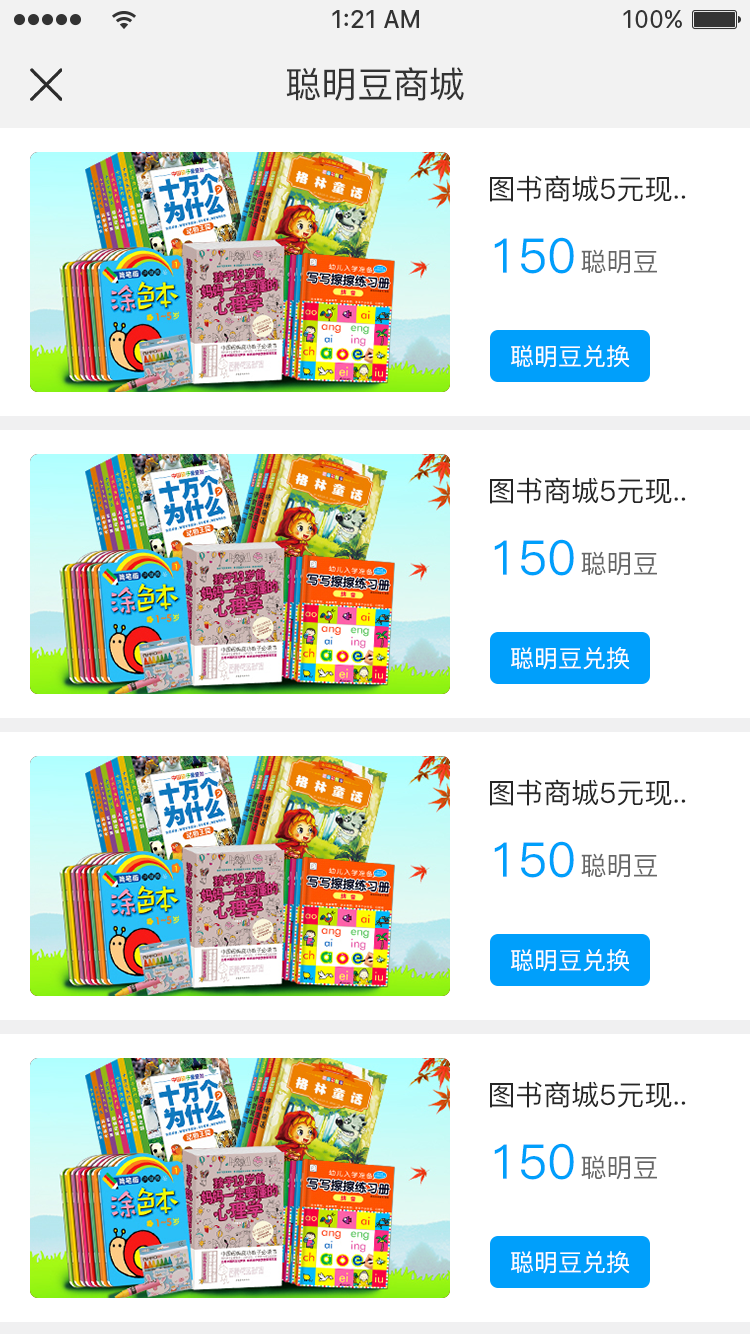
<style>
.page{position:relative;width:750px;height:1334px;background:#ffffff}
.page>*{position:absolute;margin:0}
.t1{font:36px "PingFang-SC-Medium";color:#333333}
.t2{font:28px "PingFang-SC-Medium";color:#262626}
.t3{font:48px "PingFang-SC-Medium";color:#009ffb}
.t4{font:26px "PingFang-SC-Medium";color:#666666}
.t5{font:24px "PingFang-SC-Medium";color:#ffffff}
</style>
<div class="page">
<p class="t1" style="left:286px;top:67px;width:178px;height:34px">聪明豆商城</p>
<p class="t2" style="left:490px;top:175px;width:196px;height:27px">图书商城5元现..</p>
<p class="t3" style="left:494px;top:237px;width:80px;height:37px">150</p>
<p class="t4" style="left:581px;top:249px;width:76px;height:25px">聪明豆</p>
<p class="t5" style="left:511px;top:345px;width:119px;height:23px">聪明豆兑换</p>
<p class="t2" style="left:490px;top:477px;width:196px;height:27px">图书商城5元现..</p>
<p class="t3" style="left:494px;top:539px;width:80px;height:37px">150</p>
<p class="t4" style="left:581px;top:551px;width:76px;height:25px">聪明豆</p>
<p class="t5" style="left:511px;top:647px;width:119px;height:23px">聪明豆兑换</p>
<p class="t2" style="left:490px;top:779px;width:196px;height:27px">图书商城5元现..</p>
<p class="t3" style="left:494px;top:841px;width:80px;height:37px">150</p>
<p class="t4" style="left:581px;top:853px;width:76px;height:25px">聪明豆</p>
<p class="t5" style="left:511px;top:949px;width:119px;height:23px">聪明豆兑换</p>
<p class="t2" style="left:490px;top:1081px;width:196px;height:27px">图书商城5元现..</p>
<p class="t3" style="left:494px;top:1143px;width:80px;height:37px">150</p>
<p class="t4" style="left:581px;top:1155px;width:76px;height:25px">聪明豆</p>
<p class="t5" style="left:511px;top:1251px;width:119px;height:23px">聪明豆兑换</p>
</div>
